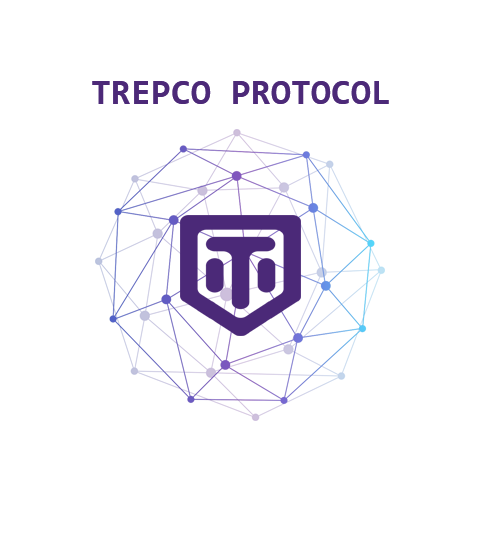
<style>
.page{position:relative;width:480px;height:550px;background:#ffffff}
.page>*{position:absolute;margin:0}
.t1{font:36px "Consolas-Bold";color:#4c2978}
</style>
<div class="page">
<p class="t1" style="left:92px;top:81px;width:297px;height:23px">TREPCO PROTOCOL</p>
</div>
